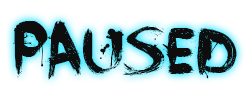
<style>
.page{position:relative;width:250px;height:100px;background:#ffffff}
.page>*{position:absolute;margin:0}
.t1{font:72px "FaceYourFears";color:#0e0e0e}
</style>
<div class="page">
<p class="t1" style="left:13px;top:19px;width:224px;height:61px">Paused</p>
</div>
